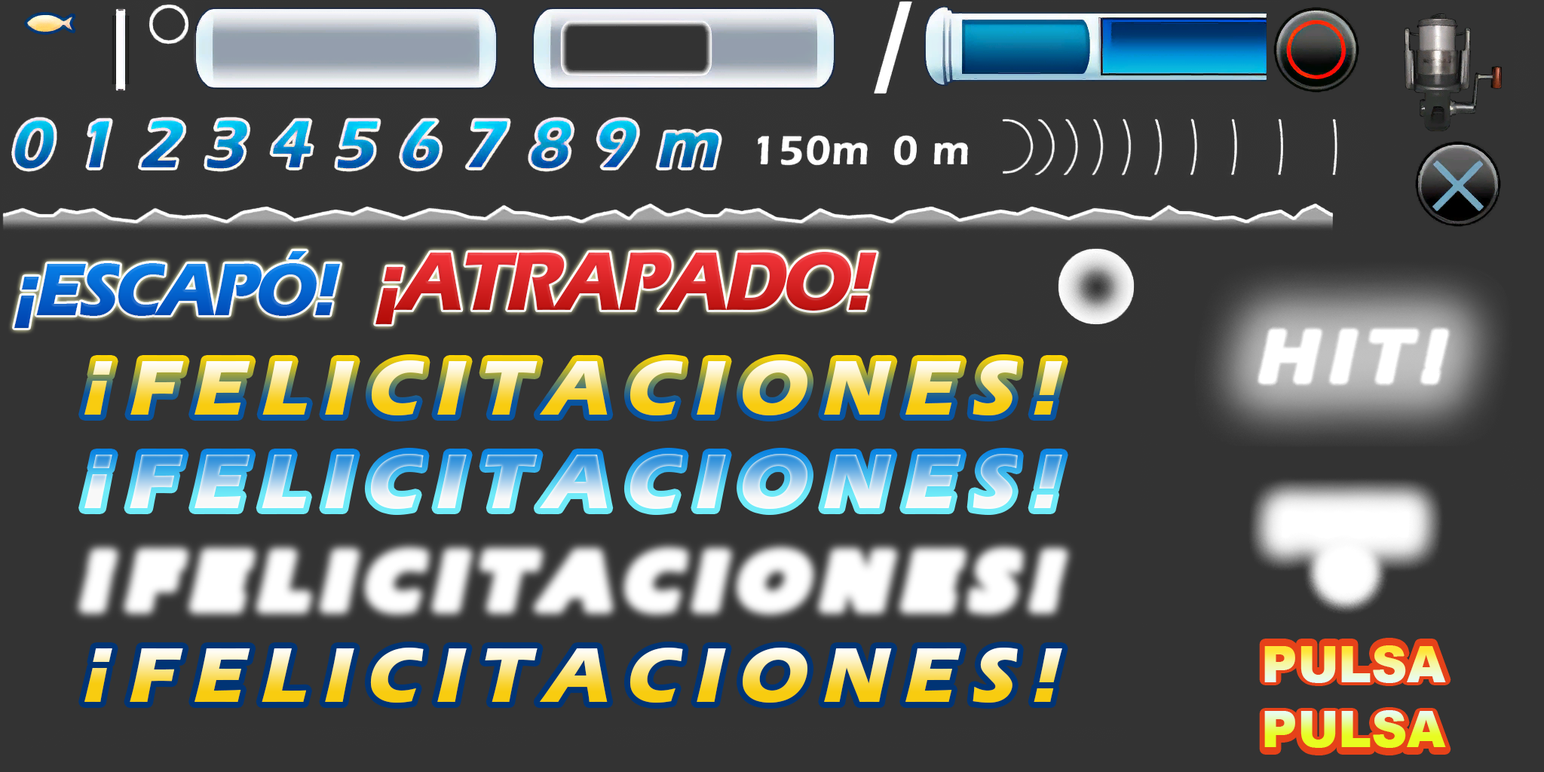
<style>
.page{position:relative;width:1544px;height:772px;background:#333333}
.page>*{position:absolute;margin:0}
.t1{font:77.1px "ErasITC-Bold";letter-spacing:-0.05em;font-style:italic;scale:0.92 1}
.t2{font:86.3px "ErasITC-Bold";letter-spacing:-0.05em;color:#d82627;font-style:italic;scale:0.92 1}
.t3{font:80px "ErasITC-Bold";letter-spacing:0.2em;font-style:italic}
.t4{font:80.1px "ErasITC-Bold";letter-spacing:0.2em;font-style:italic}
.t5{font:50.4px "Arial-Black"}
</style>
<div class="page">
<p class="t1" style="left:14px;top:251px;width:326px;height:77px">¡ESCAPÓ!</p>
<p class="t2" style="left:376px;top:252px;width:501px;height:72px">¡ATRAPADO!</p>
<p class="t3" style="left:84px;top:361px;width:28px;height:54px">¡</p>
<p class="t3" style="left:85px;top:360px;width:977px;height:68px">¡FELICITACIONES!</p>
<p class="t4" style="left:84px;top:454px;width:978px;height:68px">¡FELICITACIONES!</p>
<p class="t4" style="left:84px;top:455px;width:28px;height:53px">¡</p>
<p class="t4" style="left:84px;top:648px;width:978px;height:68px">¡FELICITACIONES!</p>
<p class="t4" style="left:84px;top:648px;width:28px;height:54px">¡</p>
<p class="t5" style="left:1265px;top:643px;width:181px;height:38px">PULSA</p>
<p class="t5" style="left:1265px;top:645px;width:181px;height:38px">PULSA</p>
<p class="t5" style="left:1265px;top:713px;width:181px;height:37px">PULSA</p>
<p class="t5" style="left:1265px;top:710px;width:181px;height:38px">PULSA</p>
</div>
